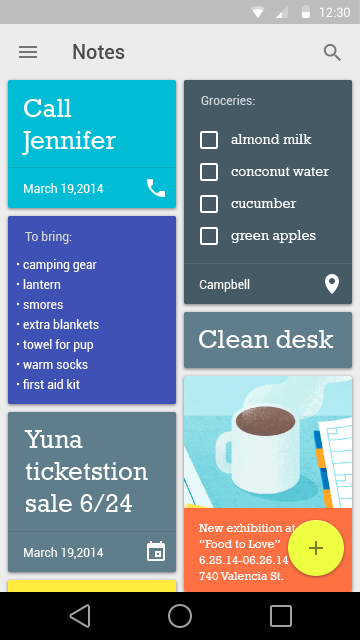
<style>
.page{position:relative;width:360px;height:640px}
.page>*{position:absolute;margin:0}
.t1{font:12.7px "Roboto-Regular";color:#ffffff}
.t2{font:20px "Roboto-Medium";color:#4d4d4d}
.t3{font:26px/32px "Rockwell";color:#ffffff}
.t4{font:12px "Roboto-Regular";color:#d1d6d8}
.t5{font:14px/32px "Rockwell";color:#ffffff}
.t6{font:12px "Roboto-Regular";color:#ffffff}
.t7{font:12px/20px "Roboto-Regular";color:#ffffff}
.t8{font:26px "Rockwell";color:#ffffff}
.t9{font:12px/16px "Rockwell";color:#ffffff}
</style>
<div class="page">
<p class="t1" style="left:320px;top:7px;width:30px;height:10px">12:30</p>
<p class="t2" style="left:73px;top:44px;width:52px;height:15px">Notes</p>
<p class="t3" style="left:22px;top:99px;width:94px;height:56px">Call<br>Jennifer</p>
<p class="t4" style="left:201px;top:95px;width:54px;height:10px">Groceries:</p>
<p class="t5" style="left:231px;top:134px;width:98px;height:109px">almond milk<br>conconut water<br>cucumber<br>green apples</p>
<p class="t6" style="left:24px;top:183px;width:80px;height:12px">March 19,2014</p>
<p class="t4" style="left:25px;top:231px;width:47px;height:13px">To bring:</p>
<p class="t7" style="left:23px;top:259px;width:76px;height:130px">camping gear<br>lantern<br>smores<br>extra blankets<br>towel for pup<br>warm socks<br>first aid kit</p>
<p class="t6" style="left:199px;top:279px;width:51px;height:13px">Campbell</p>
<p class="t8" style="left:199px;top:330px;width:135px;height:18px">Clean desk</p>
<p class="t3" style="left:24px;top:430px;width:124px;height:82px">Yuna<br>ticketstion<br>sale 6/24</p>
<p class="t9" style="left:198px;top:524px;width:121px;height:56px">New exhibition at day<br>“Food to Love”<br>6.25.14-06.26.14<br>740 Valencia St.</p>
<p class="t6" style="left:24px;top:547px;width:80px;height:12px">March 19,2014</p>
</div>
